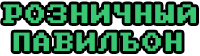
<style>
.page{position:relative;width:200px;height:56px;background:#000000}
.page>*{position:absolute;margin:0}
.t1{font:20.9px "PxPlus_IBM_BIOS";letter-spacing:0.075em;color:#39c773}
.t2{font:20.8px "PxPlus_IBM_BIOS";letter-spacing:0.075em;color:#39c773}
</style>
<div class="page">
<p class="t1" style="left:3px;top:4px;width:193px;height:19px">РОЗНИЧНЫЙ</p>
<p class="t2" style="left:13px;top:32px;width:169px;height:19px">ПАВИЛЬОН</p>
</div>
